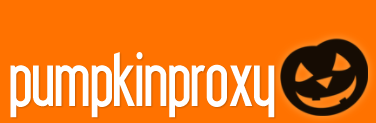
<style>
.page{position:relative;width:376px;height:123px;background:#ff7200}
.page>*{position:absolute;margin:0}
.t1{font:72px "LibelSuit";color:#ffffff}
</style>
<div class="page">
<p class="t1" style="left:10px;top:52px;width:265px;height:66px">pumpkinproxy</p>
</div>
